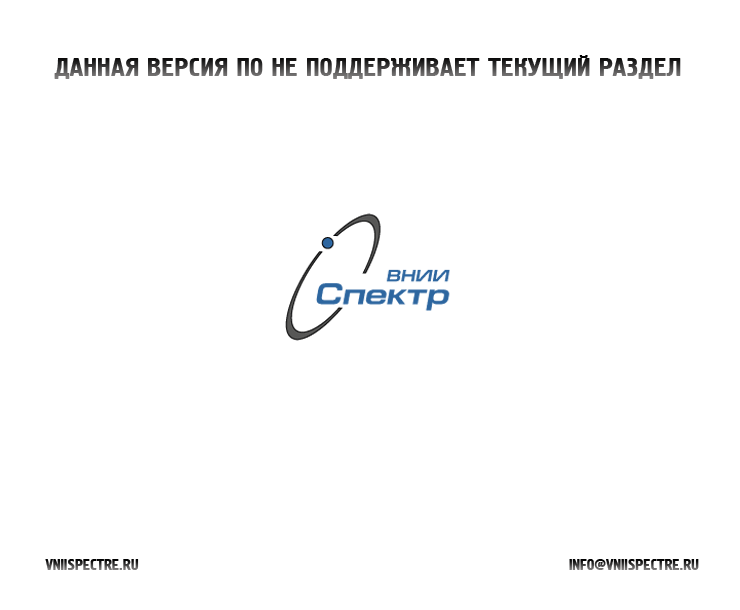
<style>
.page{position:relative;width:740px;height:610px;background:#ffffff}
.page>*{position:absolute;margin:0}
.t1{font:26.5px "Hermes";color:#000000;text-transform:uppercase}
.t2{font:14.8px "Hermes";color:#000000;text-transform:uppercase}
</style>
<div class="page">
<p class="t1" style="left:54px;top:55px;width:627px;height:24px">ДаНная версия ПО не поддерживает текущий раздел</p>
<p class="t2" style="left:45px;top:559px;width:94px;height:11px">vniispectre.ru</p>
<p class="t2" style="left:569px;top:559px;width:130px;height:11px">info@vniispectre.ru</p>
</div>
